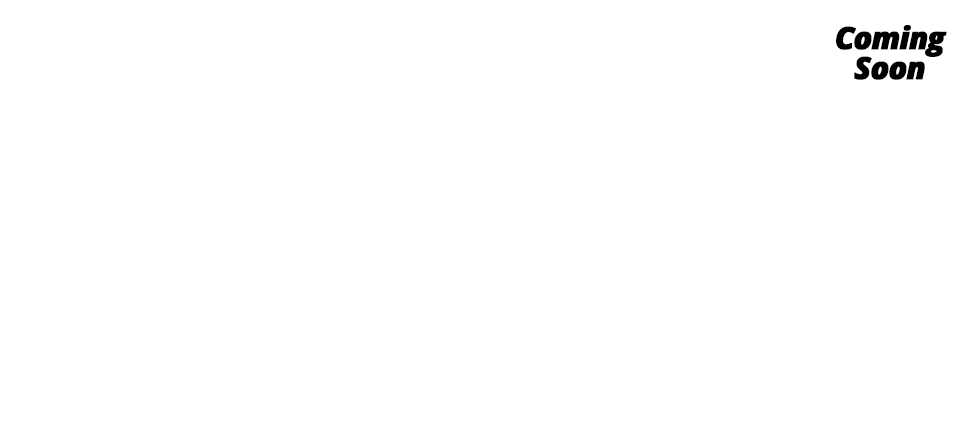
<style>
.page{position:relative;width:960px;height:432px;background:#ffffff}
.page>*{position:absolute;margin:0}
.t1{font:31px/30.1px "OpenSans-ExtraboldItalic";letter-spacing:-0.05em;color:#000000;font-weight:bold}
</style>
<div class="page">
<p class="t1" style="left:836px;top:25px;width:111px;height:55px;text-align:center">Coming<br>Soon</p>
</div>
